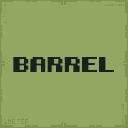
<style>
.page{position:relative;width:128px;height:128px;background:#92a762}
.page>*{position:absolute;margin:0}
.t1{font:22px "KemcoPixelBold";color:#1e1e1e}
</style>
<div class="page">
<p class="t1" style="left:13px;top:57px;width:101px;height:15px">Barrel</p>
</div>
